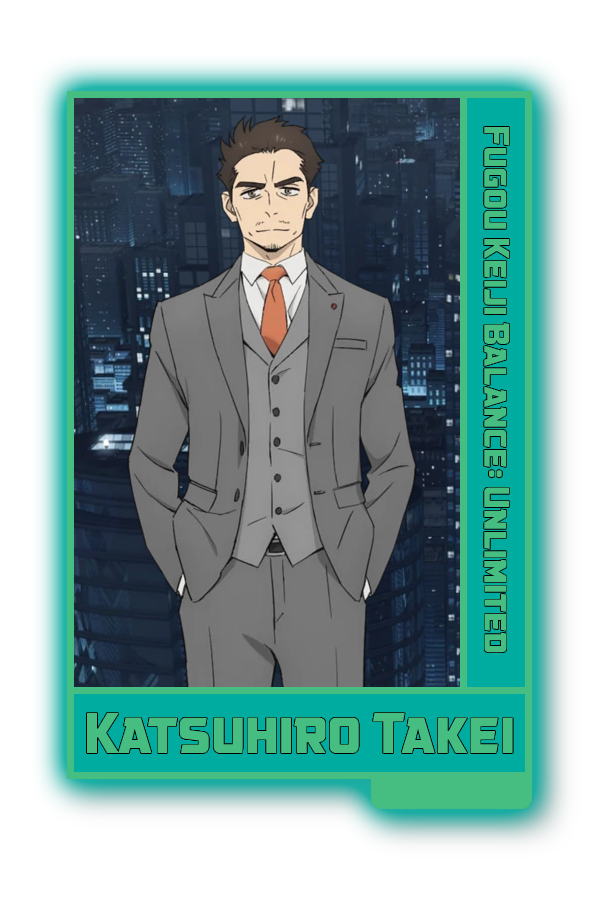
<style>
.page{position:relative;width:600px;height:900px;background:#ffffff}
.page>*{position:absolute;margin:0}
.t1{font:37.3px "GovernmentAgentBB";color:#46bd81}
.t2{font:60.1px "GovernmentAgentBB";color:#46bd81}
</style>
<div class="page">
<p class="t1" style="left:484px;top:127px;width:26px;height:526px;rotate:90deg">Fugou Keiji Balance: Unlimited</p>
<p class="t2" style="left:87px;top:712px;width:426px;height:41px">Katsuhiro Takei</p>
</div>
